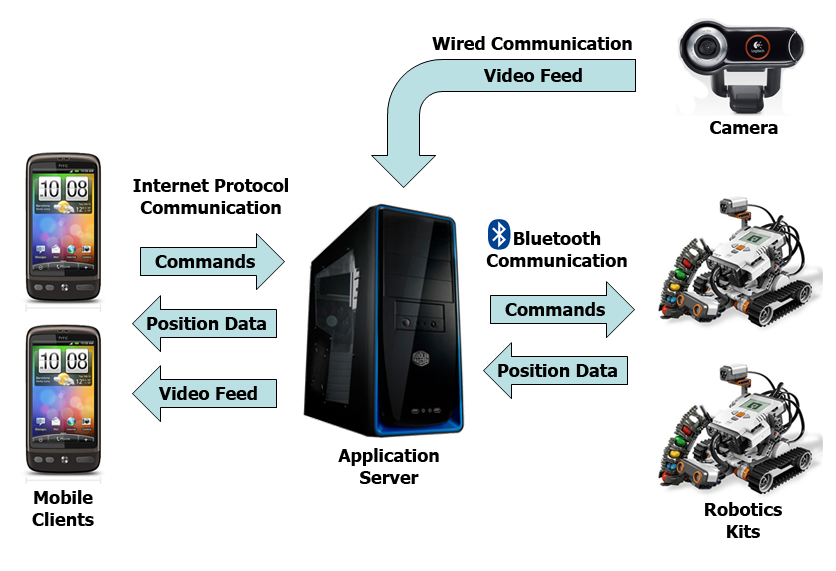
<style>
.page{position:relative;width:836px;height:571px;background:#ffffff}
.page>*{position:absolute;margin:0}
.t1{font:18px "Tahoma-Bold";color:#000000}
</style>
<div class="page">
<p class="t1" style="left:432px;top:36px;width:200px;height:14px">Wired Communication</p>
<p class="t1" style="left:483px;top:68px;width:99px;height:14px">Video Feed</p>
<p class="t1" style="left:710px;top:121px;width:68px;height:13px">Camera</p>
<p class="t1" style="left:133px;top:178px;width:155px;height:36px;text-align:center">Internet Protocol<br>Communication</p>
<p class="t1" style="left:486px;top:231px;width:141px;height:36px;text-align:center">Bluetooth<br>Communication</p>
<p class="t1" style="left:155px;top:254px;width:100px;height:14px">Commands</p>
<p class="t1" style="left:505px;top:302px;width:100px;height:14px">Commands</p>
<p class="t1" style="left:147px;top:317px;width:119px;height:13px">Position Data</p>
<p class="t1" style="left:498px;top:364px;width:119px;height:13px">Position Data</p>
<p class="t1" style="left:158px;top:386px;width:99px;height:14px">Video Feed</p>
<p class="t1" style="left:338px;top:448px;width:101px;height:36px;text-align:center">Application<br>Server</p>
<p class="t1" style="left:32px;top:490px;width:62px;height:36px;text-align:center">Mobile<br>Clients</p>
<p class="t1" style="left:705px;top:502px;width:77px;height:36px;text-align:center">Robotics<br>Kits</p>
</div>
